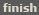
<style>
.page{position:relative;width:39px;height:15px;background:#5a5a5a}
.page>*{position:absolute;margin:0}
.t1{font:11px "Verdana-Bold";color:#dedbcb}
</style>
<div class="page">
<p class="t1" style="left:3px;top:3px;width:34px;height:9px">finish</p>
</div>
